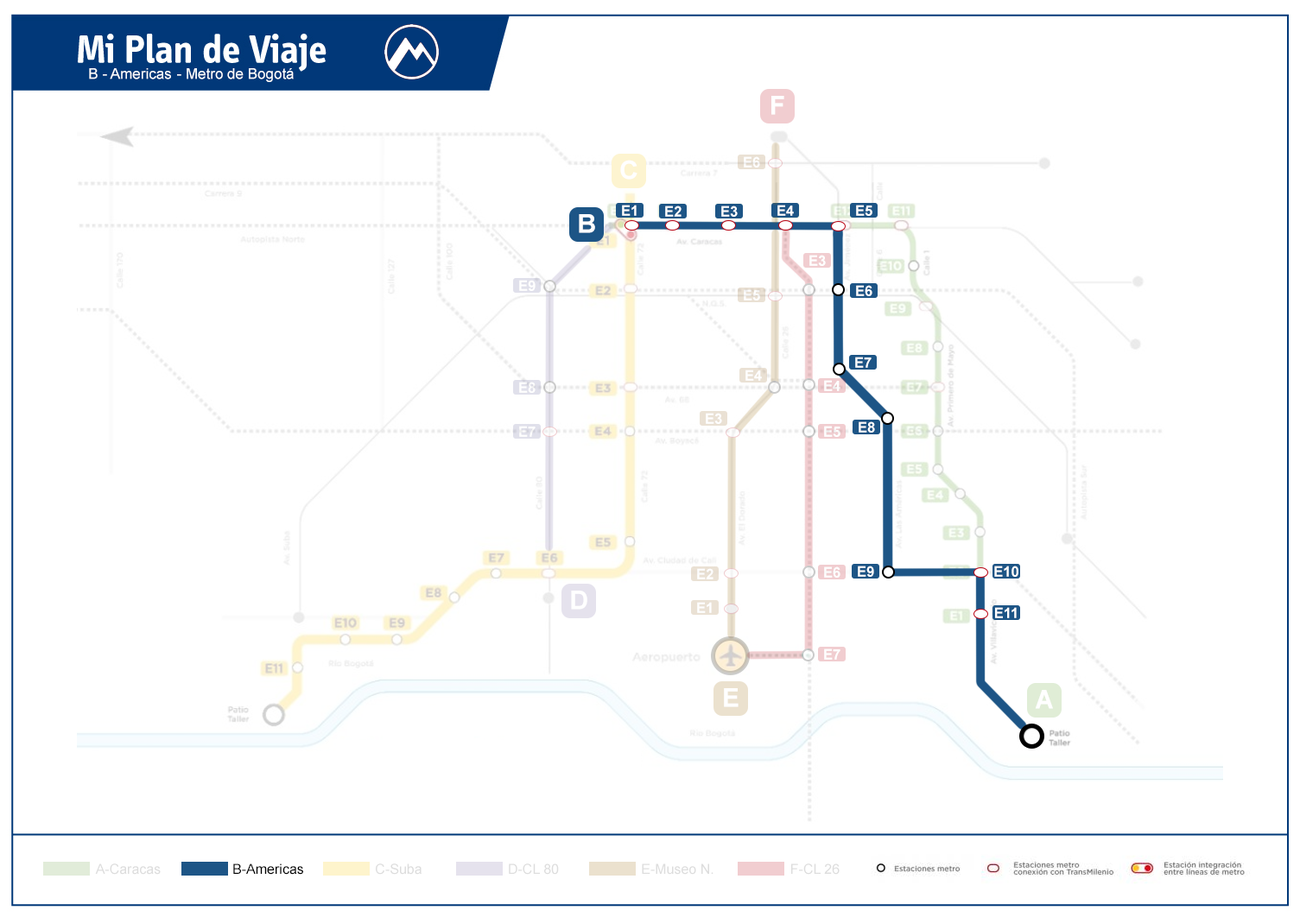
<style>
.page{position:relative;width:1300px;height:917px;background:#ffffff}
.page>*{position:absolute;margin:0}
.t1{font:14.7px "ArialMT";color:#ffffff}
.t2{font:25.9px "Arial-BoldMT";color:#ffffff}
.t3{font:14.3px "Arial-BoldMT";color:#ffffff}
.t4{font:13.8px "ArialMT";color:#dddddd}
.t5{font:13.8px "ArialMT";color:#000000}
</style>
<div class="page">
<p class="t1" style="left:89px;top:68px;width:82px;height:11px">B - Americas</p>
<p class="t2" style="left:771px;top:96px;width:13px;height:19px">F</p>
<p class="t2" style="left:620px;top:160px;width:17px;height:20px">C</p>
<p class="t3" style="left:744px;top:156px;width:16px;height:12px">E6</p>
<p class="t3" style="left:622px;top:205px;width:15px;height:11px">E1</p>
<p class="t3" style="left:665px;top:206px;width:16px;height:11px">E2</p>
<p class="t3" style="left:721px;top:206px;width:17px;height:11px">E3</p>
<p class="t3" style="left:777px;top:205px;width:17px;height:11px">E4</p>
<p class="t3" style="left:856px;top:205px;width:16px;height:11px">E5</p>
<p class="t2" style="left:579px;top:214px;width:16px;height:19px">B</p>
<p class="t3" style="left:809px;top:255px;width:17px;height:11px">E3</p>
<p class="t3" style="left:519px;top:280px;width:17px;height:11px">E9</p>
<p class="t3" style="left:744px;top:289px;width:16px;height:12px">E5</p>
<p class="t3" style="left:856px;top:285px;width:16px;height:11px">E6</p>
<p class="t3" style="left:855px;top:357px;width:17px;height:11px">E7</p>
<p class="t3" style="left:745px;top:370px;width:17px;height:11px">E4</p>
<p class="t3" style="left:519px;top:382px;width:17px;height:11px">E8</p>
<p class="t3" style="left:824px;top:380px;width:16px;height:11px">E4</p>
<p class="t3" style="left:706px;top:413px;width:16px;height:11px">E3</p>
<p class="t3" style="left:519px;top:426px;width:17px;height:11px">E7</p>
<p class="t3" style="left:824px;top:426px;width:16px;height:11px">E5</p>
<p class="t3" style="left:859px;top:422px;width:16px;height:11px">E8</p>
<p class="t3" style="left:697px;top:568px;width:16px;height:12px">E2</p>
<p class="t3" style="left:824px;top:567px;width:16px;height:11px">E6</p>
<p class="t3" style="left:858px;top:566px;width:16px;height:11px">E9</p>
<p class="t3" style="left:994px;top:566px;width:24px;height:11px">E10</p>
<p class="t2" style="left:571px;top:591px;width:16px;height:19px">D</p>
<p class="t3" style="left:697px;top:602px;width:15px;height:11px">E1</p>
<p class="t3" style="left:995px;top:607px;width:22px;height:11px">E11</p>
<p class="t3" style="left:824px;top:649px;width:16px;height:11px">E7</p>
<p class="t2" style="left:724px;top:688px;width:15px;height:19px">E</p>
<p class="t2" style="left:1035px;top:690px;width:18px;height:19px">A</p>
<p class="t4" style="left:95px;top:864px;width:66px;height:11px">A-Caracas</p>
<p class="t5" style="left:233px;top:864px;width:70px;height:11px">B-Americas</p>
<p class="t4" style="left:376px;top:864px;width:46px;height:11px">C-Suba</p>
<p class="t4" style="left:509px;top:864px;width:50px;height:11px">D-CL 80</p>
<p class="t4" style="left:642px;top:864px;width:71px;height:11px">E-Museo N.</p>
<p class="t4" style="left:791px;top:864px;width:49px;height:11px">F-CL 26</p>
</div>
